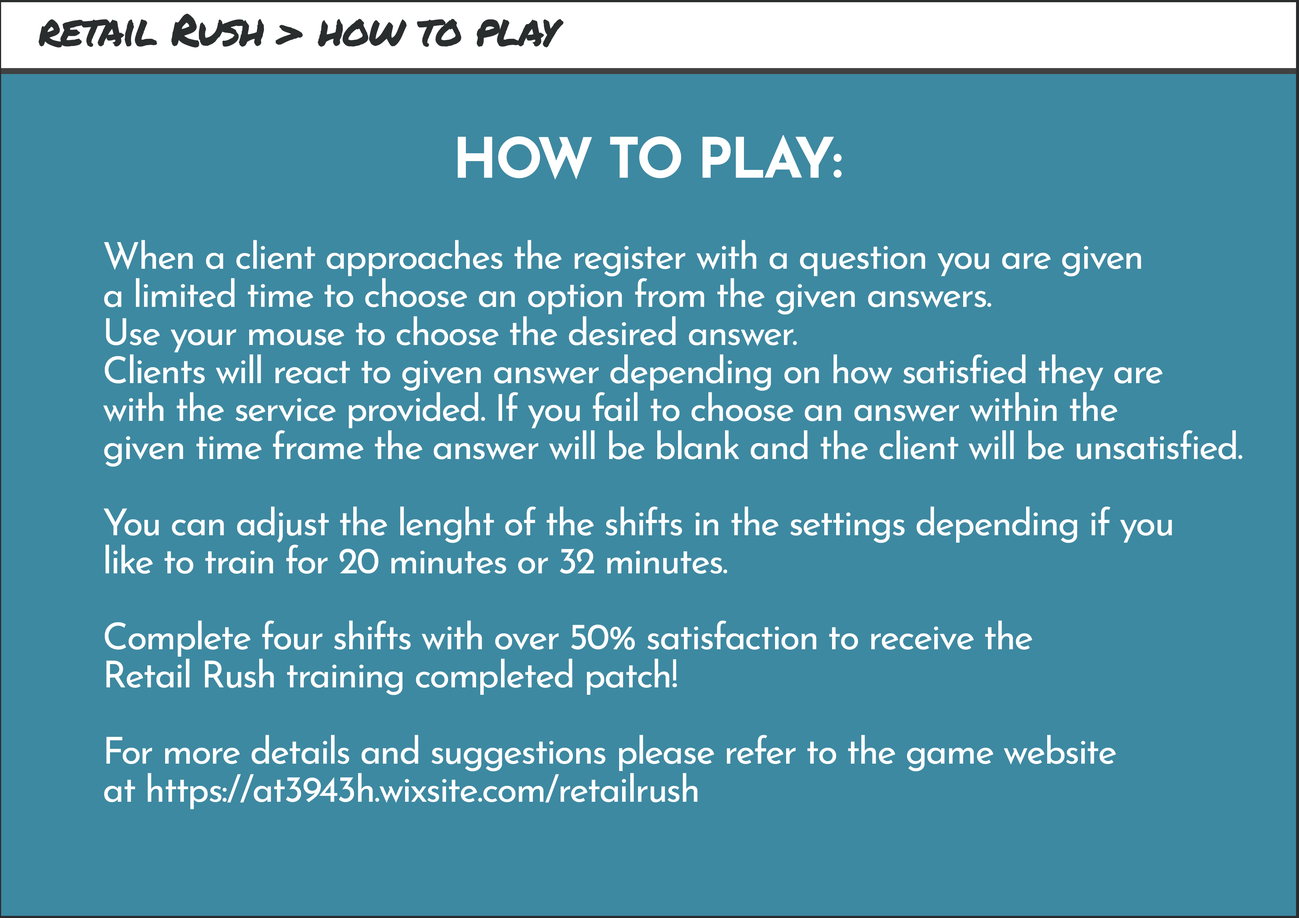
<style>
.page{position:relative;width:1299px;height:918px;background:#3d89a1}
.page>*{position:absolute;margin:0}
.t1{font:44px "PermanentMarker-Regular";letter-spacing:-0.04em;color:#2a2d2d}
.t2{font:55.5px "JosefinSans-Bold";letter-spacing:-0.04em;color:#ffffff}
.t3{font:37px/38.1px "JosefinSans-Regular";letter-spacing:-0.04em;color:#ffffff}
</style>
<div class="page">
<p class="t1" style="left:39px;top:13px;width:524px;height:35px">retail Rush &gt; how to play</p>
<p class="t2" style="left:458px;top:135px;width:384px;height:45px">HOW TO PLAY:</p>
<p class="t3" style="left:103px;top:240px;width:1139px;height:569px">When a client approaches the register with a question you are given <br>a limited time to choose an option from the given answers. <br>Use your mouse to choose the desired answer.<br>Clients will react to given answer depending on how satisfied they are <br>with the service provided. If you fail to choose an answer within the <br>given time frame the answer will be blank and the client will be unsatisfied.<br><br>You can adjust the lenght of the shifts in the settings depending if you <br>like to train for 20 minutes or 32 minutes.<br><br>Complete four shifts with over 50% satisfaction to receive the <br>Retail Rush training completed patch!<br><br>For more details and suggestions please refer to the game website <br>at https://at3943h.wixsite.com/retailrush</p>
</div>
